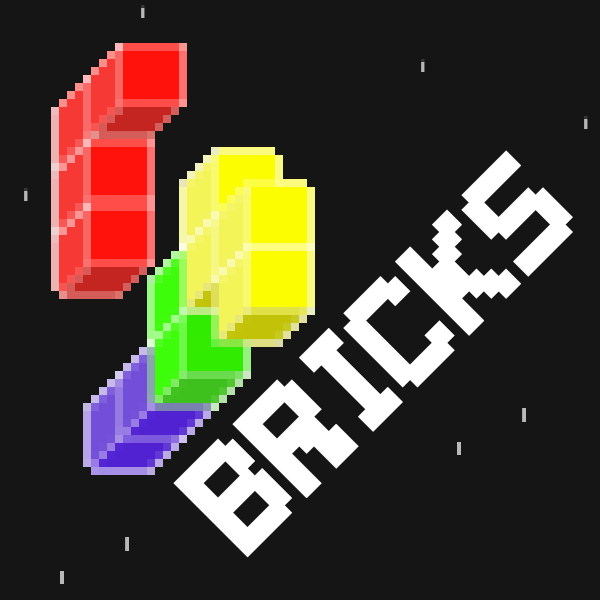
<style>
.page{position:relative;width:600px;height:600px;background:#151515}
.page>*{position:absolute;margin:0}
.t1{font:167.1px "Super-Smash-TV";color:#ffffff}
</style>
<div class="page">
<p class="t1" style="left:173px;top:150px;width:400px;height:408px;rotate:-45deg">BRICKS</p>
</div>
